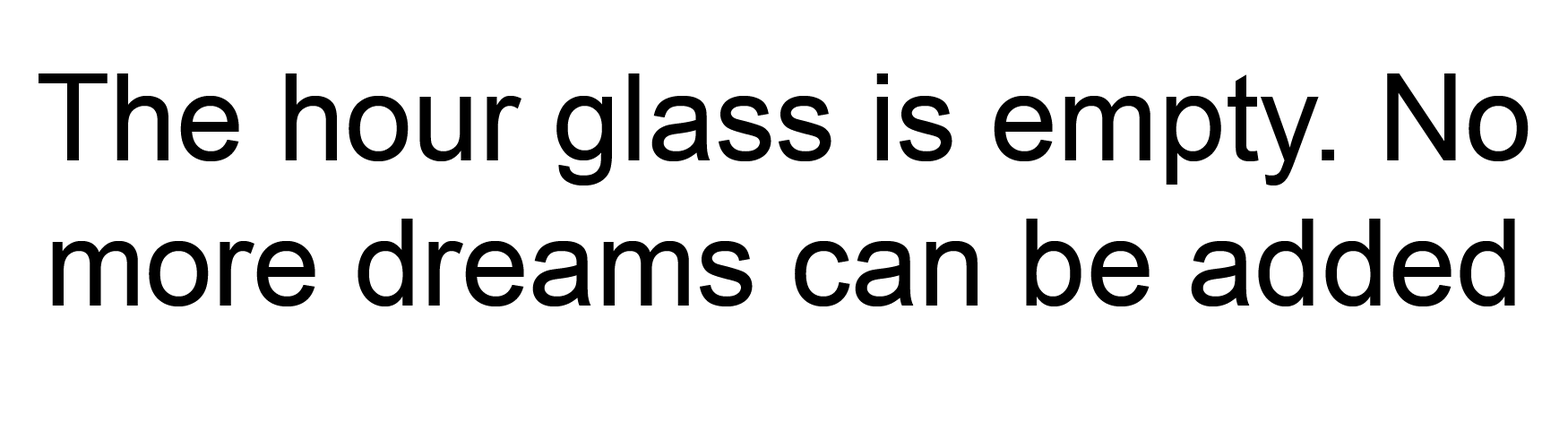
<style>
.page{position:relative;width:1568px;height:448px;background:#ffffff}
.page>*{position:absolute;margin:0}
.t1{font:121px "ArialMT";color:#000000}
</style>
<div class="page">
<p class="t1" style="left:39px;top:73px;width:1490px;height:233px;text-align:center">The hour glass is empty. No more dreams can be added</p>
</div>
